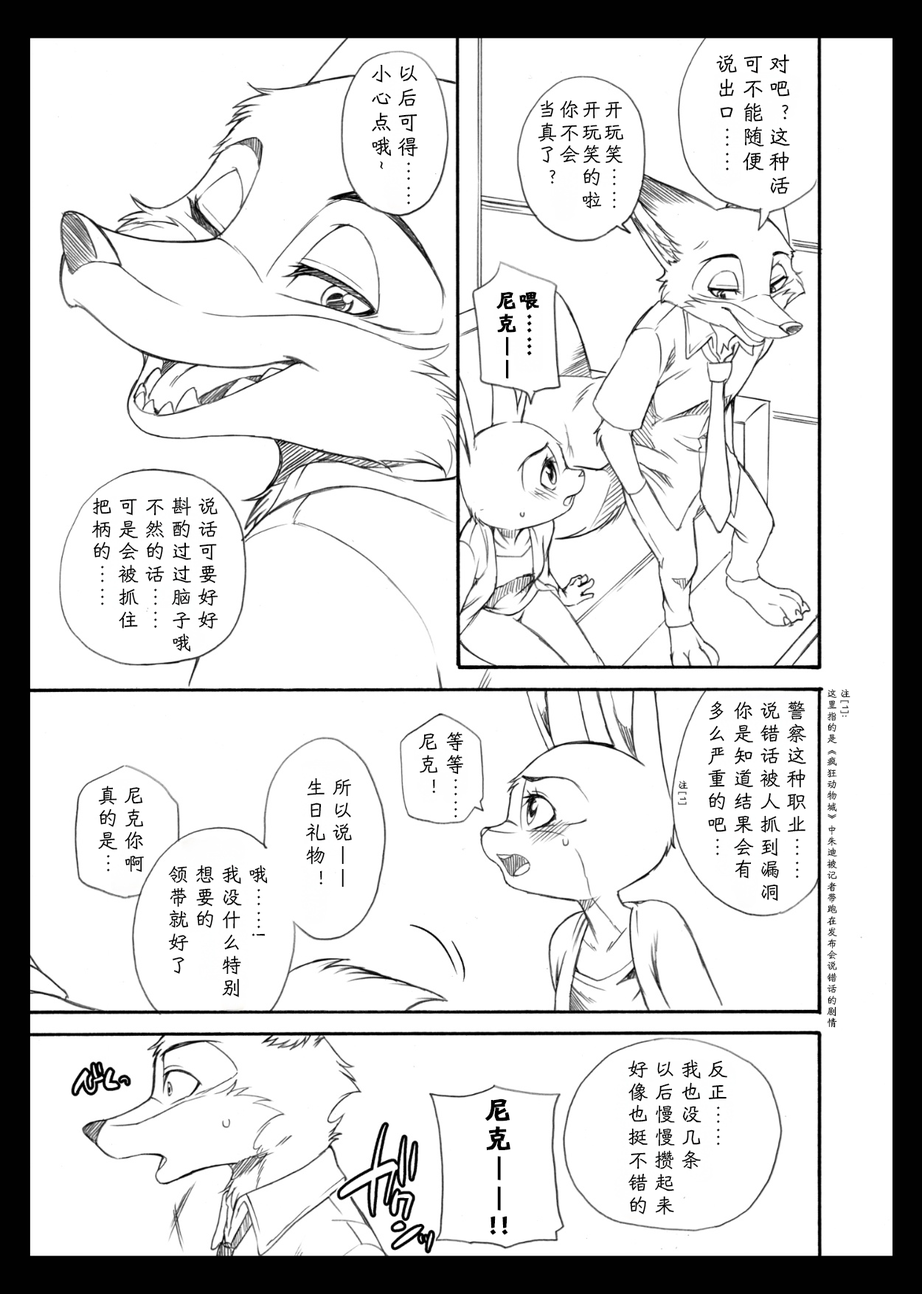
<style>
.page{position:relative;width:922px;height:1294px;background:#ffffff}
.page>*{position:absolute;margin:0}
.t1{font:22.1px/26.5px "HYShiWei55U";letter-spacing:0.1em;color:#000000}
.t2{font:20.6px/22.1px "HYShiWei55U";letter-spacing:0.1em;color:#000000}
.t3{font:20.6px/22.1px "HYShiWei75U";letter-spacing:0.1em;color:#000000;font-weight:bold}
.t4{font:20.6px/26.5px "HYShiWei55U";letter-spacing:0.1em;color:#000000}
.t5{font:10.3px/13.3px "HYShiWei55U";letter-spacing:0.1em;color:#000000}
.t6{font:10.3px/26.5px "HYShiWei55U";letter-spacing:0.1em;color:#000000}
.t7{font:26.5px/26.5px "HYShiWei75U";letter-spacing:0.1em;color:#000000;font-weight:bold}
.t8{font:26.5px "HYShiWei75U";letter-spacing:0.1em;color:#000000;font-weight:bold}
</style>
<div class="page">
<p class="t1" style="left:716px;top:54px;width:74px;height:140px">对吧？这种活<br>可不能随便<br>说出口……</p>
<p class="t1" style="left:372px;top:64px;width:46px;height:140px">以后可得……<br>小心点哦~</p>
<p class="t2" style="left:538px;top:100px;width:86px;height:109px">开玩笑……<br>开玩笑的啦<br>你不会<br>当真了？</p>
<p class="t3" style="left:496px;top:291px;width:43px;height:87px">喂……<br>尼克——</p>
<p class="t4" style="left:91px;top:496px;width:127px;height:156px">说话可要好好<br>斟酌过过脑子哦<br>不然的话……<br>可是会被抓住<br>把柄的……</p>
<p class="t5" style="left:827px;top:689px;width:23px;height:338px">注[1]:<br>这里指的是《疯狂动物城》中朱迪被记者带跑在发布会说错话的剧情</p>
<p class="t4" style="left:708px;top:701px;width:98px;height:200px">警察这种职业……<br>说错话被人抓到漏洞<br>你是知道结果会有<br>多么严重的吧…</p>
<p class="t4" style="left:418px;top:732px;width:45px;height:86px">等等……<br>尼克！</p>
<p class="t4" style="left:98px;top:785px;width:46px;height:87px">尼克你啊<br>真的是…</p>
<p class="t4" style="left:305px;top:777px;width:47px;height:110px">所以说——<br>生日礼物！</p>
<p class="t6" style="left:678px;top:780px;width:10px;height:25px">注[1]</p>
<p class="t4" style="left:168px;top:864px;width:100px;height:133px">哦……!<br>我没什么特别<br>想要的<br>领带就好了</p>
<p class="t4" style="left:628px;top:1059px;width:99px;height:156px">反正……<br>我也没几条<br>以后慢慢攒起来<br>好像也挺不错的</p>
<p class="t7" style="left:485px;top:1098px;width:25px;height:112px">尼克——</p>
<p class="t8" style="left:490px;top:1215px;width:18px;height:20px">!!</p>
</div>
